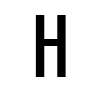
<style>
.page{position:relative;width:100px;height:100px;background:#ffffff}
.page>*{position:absolute;margin:0}
.t1{font:100px "TwCenMT-Condensed";color:#000000}
</style>
<div class="page">
<p class="t1" style="left:35px;top:15px;width:31px;height:62px">H</p>
</div>
